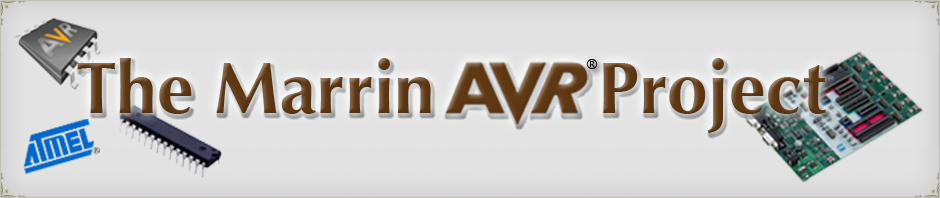
<style>
.page{position:relative;width:940px;height:198px;background:#e2e2e2}
.page>*{position:absolute;margin:0}
.t1{font:73.4px "Optima-Bold";color:#5f3813}
.t2{font:13.9px "Optima-Regular";color:#000000}
</style>
<div class="page">
<p class="t1" style="left:77px;top:58px;width:749px;height:75px">The Marrin        Project</p>
<p class="t2" style="left:586px;top:59px;width:12px;height:10px">®</p>
</div>
